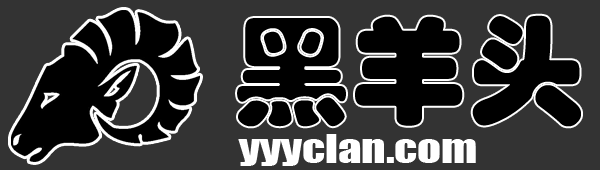
<style>
.page{position:relative;width:600px;height:170px;background:#333333}
.page>*{position:absolute;margin:0}
.t1{font:117px "STHupo";color:#000000}
.t2{font:37.3px "Impact";color:#ffffff;scale:1.25 1}
</style>
<div class="page">
<p class="t1" style="left:237px;top:15px;width:344px;height:112px">黑羊头</p>
<p class="t2" style="left:238px;top:134px;width:238px;height:32px">yyyclan.com</p>
</div>
